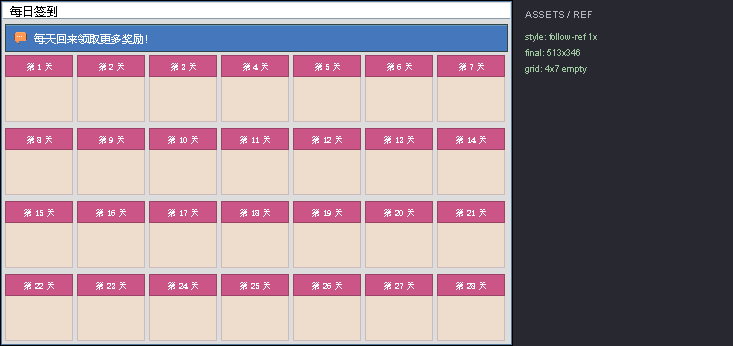
<style>
.page{position:relative;width:733px;height:346px;background:#eeddcc}
.page>*{position:absolute;margin:0}
.t1{font:12px "MicrosoftYaHei";color:#000000}
.t2{font:10px "ArialMT";color:#b4b4be}
.t3{font:11px "MicrosoftYaHei";color:#ffffff}
.t4{font:9px "ArialMT";color:#a0c8a0}
.t5{font:9px "NSimSun";color:#ffffff}
</style>
<div class="page">
<p class="t1" style="left:10px;top:6px;width:47px;height:11px">每日签到</p>
<p class="t2" style="left:525px;top:11px;width:67px;height:7px">ASSETS / REF</p>
<p class="t3" style="left:34px;top:33px;width:113px;height:11px">每天回来领取更多奖励！</p>
<p class="t4" style="left:525px;top:33px;width:72px;height:9px">style: follow-ref 1x</p>
<p class="t4" style="left:525px;top:49px;width:55px;height:7px">final: 513x346</p>
<p class="t5" style="left:27px;top:63px;width:25px;height:8px">第1天</p>
<p class="t5" style="left:99px;top:63px;width:25px;height:8px">第2天</p>
<p class="t5" style="left:171px;top:63px;width:25px;height:8px">第3天</p>
<p class="t5" style="left:243px;top:63px;width:25px;height:8px">第4天</p>
<p class="t5" style="left:315px;top:63px;width:25px;height:8px">第5天</p>
<p class="t5" style="left:387px;top:63px;width:25px;height:8px">第6天</p>
<p class="t5" style="left:459px;top:63px;width:25px;height:8px">第7天</p>
<p class="t4" style="left:525px;top:65px;width:62px;height:9px">grid: 4x7 empty</p>
<p class="t5" style="left:27px;top:136px;width:25px;height:8px">第8天</p>
<p class="t5" style="left:99px;top:136px;width:25px;height:8px">第9天</p>
<p class="t5" style="left:168px;top:136px;width:30px;height:8px">第10天</p>
<p class="t5" style="left:240px;top:136px;width:30px;height:8px">第11天</p>
<p class="t5" style="left:312px;top:136px;width:30px;height:8px">第12天</p>
<p class="t5" style="left:384px;top:136px;width:30px;height:8px">第13天</p>
<p class="t5" style="left:456px;top:136px;width:30px;height:8px">第14天</p>
<p class="t5" style="left:24px;top:209px;width:30px;height:8px">第15天</p>
<p class="t5" style="left:96px;top:209px;width:30px;height:8px">第16天</p>
<p class="t5" style="left:168px;top:209px;width:30px;height:8px">第17天</p>
<p class="t5" style="left:240px;top:209px;width:30px;height:8px">第18天</p>
<p class="t5" style="left:312px;top:209px;width:30px;height:8px">第19天</p>
<p class="t5" style="left:384px;top:209px;width:30px;height:8px">第20天</p>
<p class="t5" style="left:456px;top:209px;width:30px;height:8px">第21天</p>
<p class="t5" style="left:24px;top:282px;width:30px;height:8px">第22天</p>
<p class="t5" style="left:96px;top:282px;width:30px;height:8px">第23天</p>
<p class="t5" style="left:168px;top:282px;width:30px;height:8px">第24天</p>
<p class="t5" style="left:240px;top:282px;width:30px;height:8px">第25天</p>
<p class="t5" style="left:312px;top:282px;width:30px;height:8px">第26天</p>
<p class="t5" style="left:384px;top:282px;width:30px;height:8px">第27天</p>
<p class="t5" style="left:456px;top:282px;width:30px;height:8px">第28天</p>
</div>
